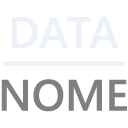
<style>
.page{position:relative;width:128px;height:128px;background:#ffffff}
.page>*{position:absolute;margin:0}
.t1{font:44px "YuGothicUI-Bold";color:#edf1f9}
.t2{font:44px "YuGothicUI-Bold";color:#808080}
</style>
<div class="page">
<p class="t1" style="left:11px;top:17px;width:108px;height:31px">DATA</p>
<p class="t2" style="left:1px;top:79px;width:126px;height:33px">NOME</p>
</div>
